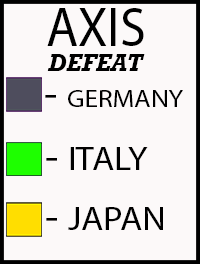
<style>
.page{position:relative;width:200px;height:264px;background:#fcf9f9}
.page>*{position:absolute;margin:0}
.t1{font:55px "MyriadPro-Regular";color:#000000;scale:0.95 1}
.t2{font:24px "Rockwell-BoldItalic";color:#000000}
.t3{font:24.8px "MyriadPro-Regular";color:#000000;scale:1.1 1}
.t4{font:40px "MyriadPro-Regular";color:#000000;scale:1.1 1}
.t5{font:33px "MyriadPro-Regular";color:#000000;scale:1.1 1}
</style>
<div class="page">
<p class="t1" style="left:47px;top:8px;width:97px;height:38px">AXIS</p>
<p class="t2" style="left:47px;top:54px;width:98px;height:17px">DEFEAT</p>
<p class="t3" style="left:45px;top:90px;width:138px;height:17px"><span class="t4">- </span>GERMANY</p>
<p class="t5" style="left:46px;top:147px;width:102px;height:23px"><span class="t4">- </span>ITALY</p>
<p class="t5" style="left:46px;top:207px;width:117px;height:23px"><span class="t4">- </span>JAPAN</p>
</div>
